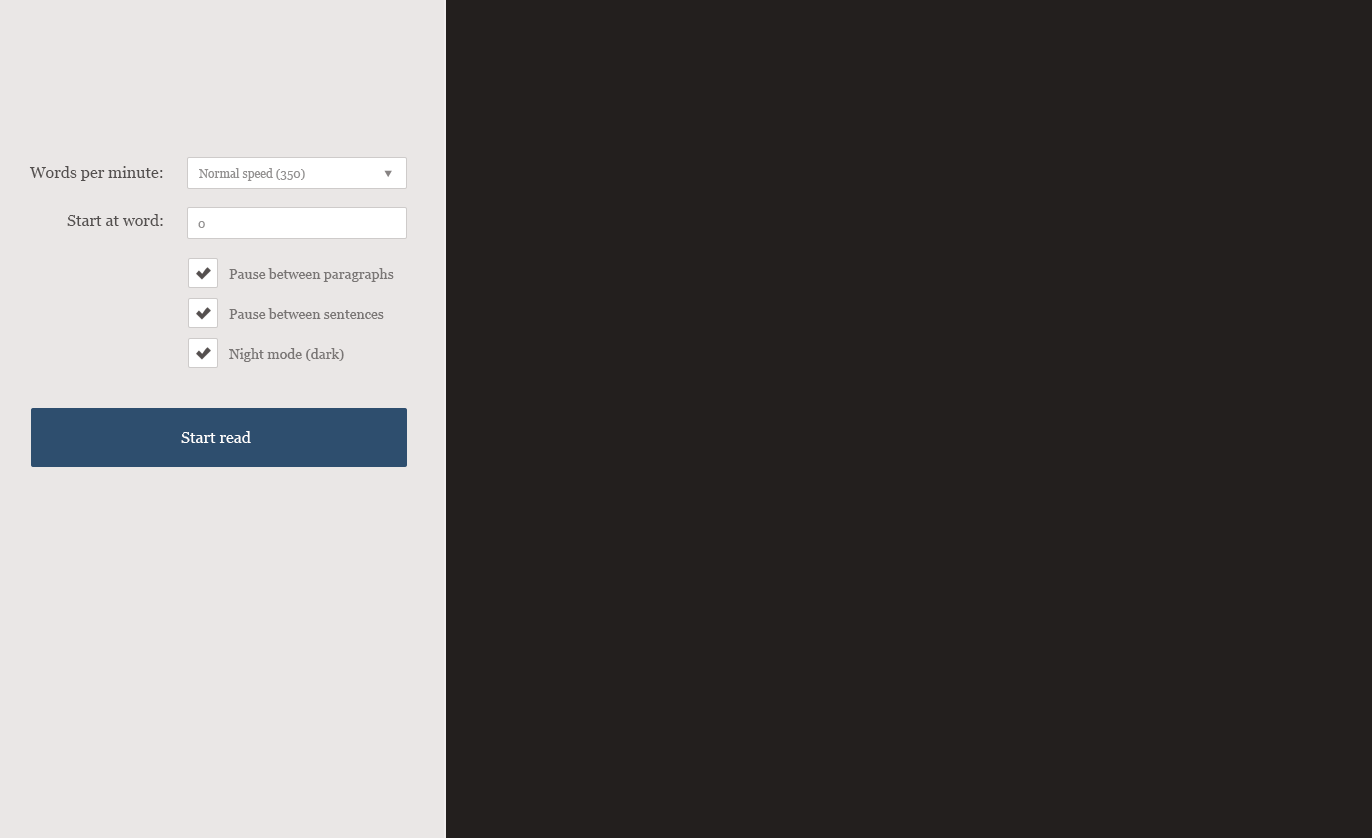
<style>
.page{position:relative;width:1372px;height:838px;background:#231f1e}
.page>*{position:absolute;margin:0}
.t1{font:16px "Georgia";color:#534f4e}
.t2{font:12px "Georgia";color:#939191}
.t3{font:14px "Georgia";color:#7a7675}
.t4{font:16px "Georgia";color:#ffffff}
</style>
<div class="page">
<p class="t1" style="left:29px;top:166px;width:134px;height:15px">Words per minute:</p>
<p class="t2" style="left:199px;top:168px;width:106px;height:13px">Normal speed (350)</p>
<p class="t1" style="left:67px;top:214px;width:96px;height:12px">Start at word:</p>
<p class="t2" style="left:198px;top:221px;width:7px;height:7px">0</p>
<p class="t3" style="left:229px;top:268px;width:165px;height:14px">Pause between paragraphs</p>
<p class="t3" style="left:229px;top:308px;width:155px;height:11px">Pause between sentences</p>
<p class="t3" style="left:229px;top:348px;width:115px;height:14px">Night mode (dark)</p>
<p class="t4" style="left:181px;top:431px;width:70px;height:12px">Start read</p>
</div>
